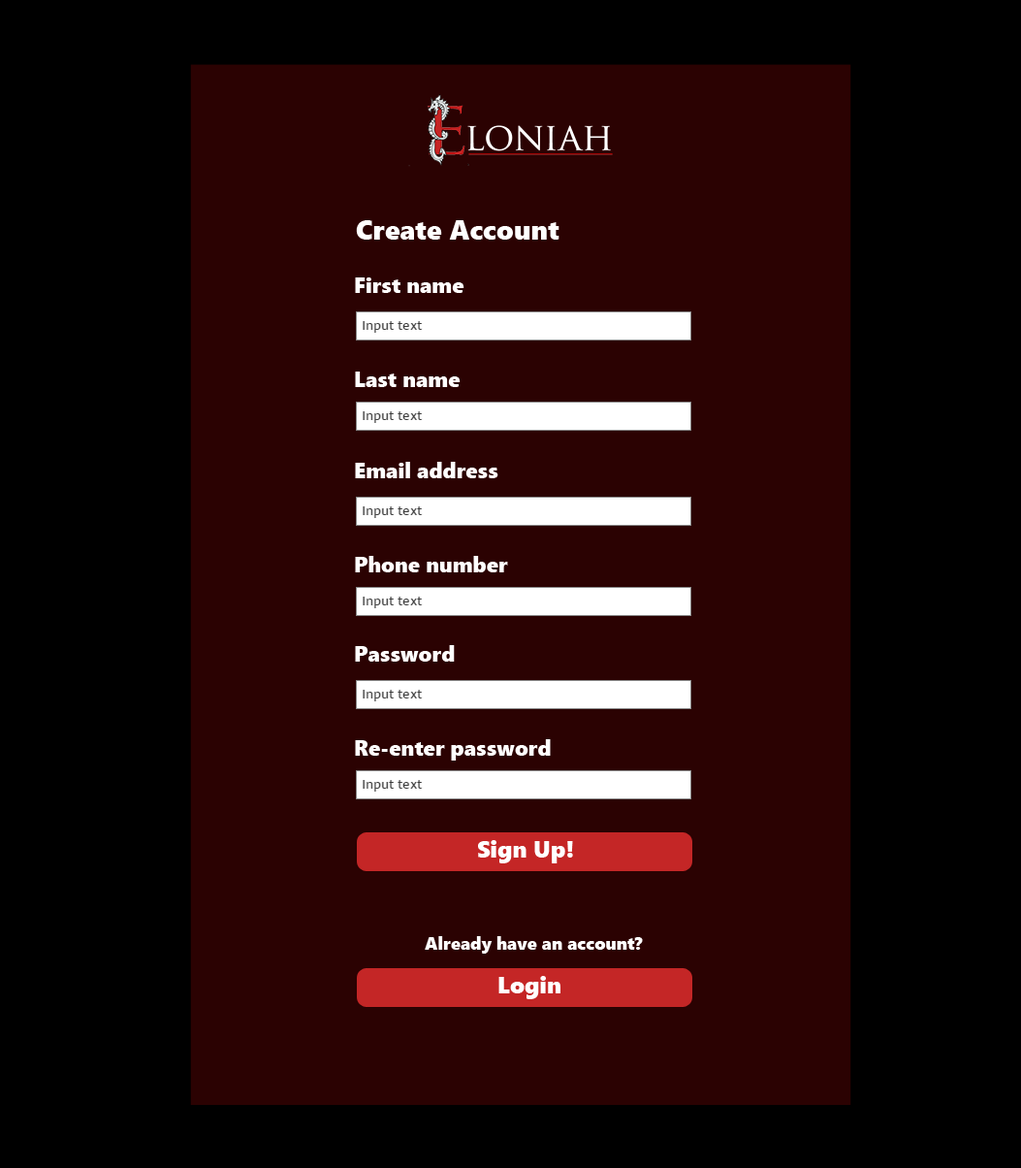
<style>
.page{position:relative;width:1021px;height:1168px;background:#2b0202}
.page>*{position:absolute;margin:0}
.t1{font:27.2px "SegoeUIBlack";color:#ffffff}
.t2{font:21.3px "SegoeUIBlack";color:#ffffff}
.t3{font:23.3px "SegoeUIBlack";color:#ffffff}
.t4{font:17.5px "SegoeUIBlack";color:#ffffff}
</style>
<div class="page">
<p class="t1" style="left:356px;top:220px;width:204px;height:20px">Create Account</p>
<p class="t2" style="left:355px;top:277px;width:110px;height:16px">First name</p>
<p class="t2" style="left:355px;top:371px;width:106px;height:16px">Last name</p>
<p class="t2" style="left:355px;top:462px;width:143px;height:16px">Email address</p>
<p class="t2" style="left:355px;top:556px;width:153px;height:16px">Phone number</p>
<p class="t2" style="left:355px;top:645px;width:100px;height:16px">Password</p>
<p class="t2" style="left:355px;top:739px;width:196px;height:21px">Re-enter password</p>
<p class="t3" style="left:478px;top:840px;width:95px;height:23px">Sign Up!</p>
<p class="t4" style="left:425px;top:936px;width:218px;height:17px">Already have an account?</p>
<p class="t3" style="left:498px;top:976px;width:63px;height:23px">Login</p>
</div>
